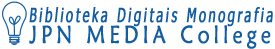
<style>
.page{position:relative;width:275px;height:49px;background:#ffffff}
.page>*{position:absolute;margin:0}
.t1{font:19.6px "Tahoma";letter-spacing:0.2em;color:#135da3;font-weight:bold;font-style:italic;scale:0.63 1}
.t2{font:24.7px "MaiandraGD-Regular";letter-spacing:0.2em;color:#135da3;font-weight:bold;scale:0.79 1}
</style>
<div class="page">
<p class="t1" style="left:29px;top:7px;width:244px;height:20px">Biblioteka Digitais Monografia</p>
<p class="t2" style="left:29px;top:25px;width:242px;height:24px">JPN MEDIA College</p>
</div>
